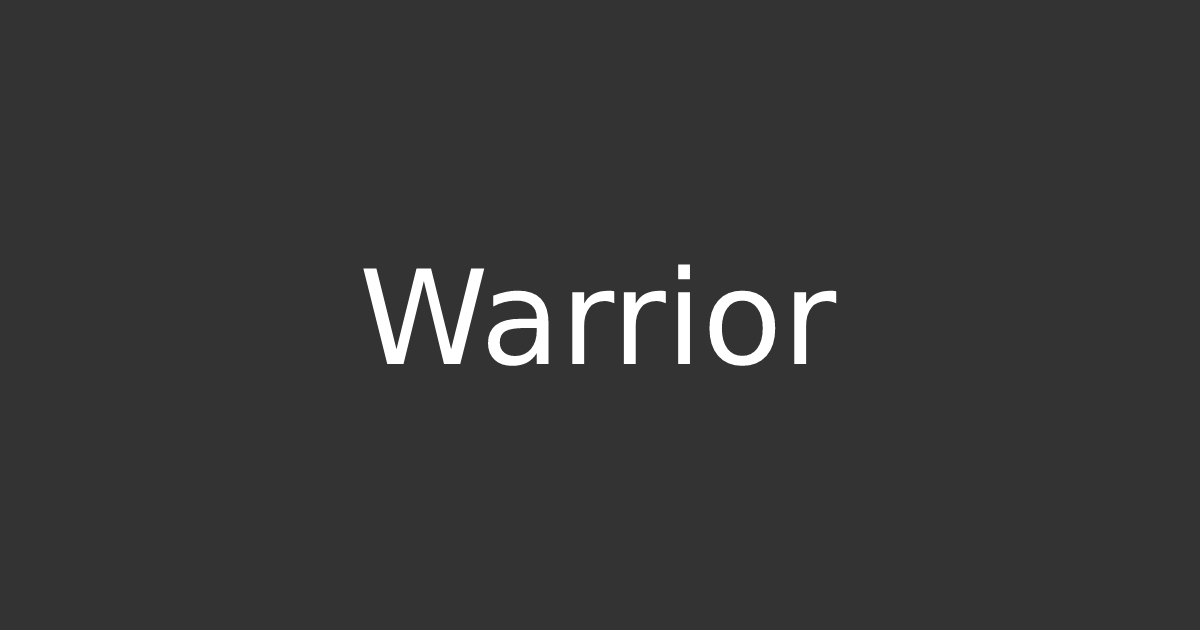
<style>
.page{position:relative;width:1200px;height:630px;background:#333333}
.page>*{position:absolute;margin:0}
.t1{font:131px "DejaVuSans";color:#ffffff}
</style>
<div class="page">
<p class="t1" style="left:363px;top:264px;width:474px;height:102px">Warrior</p>
</div>
